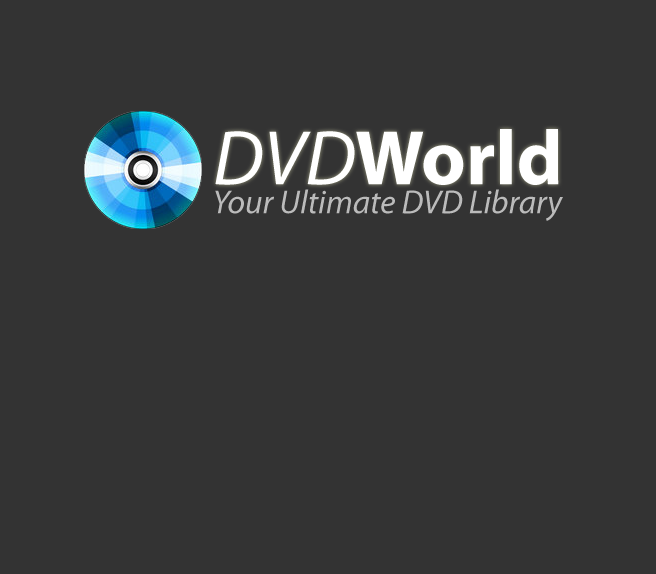
<style>
.page{position:relative;width:656px;height:574px;background:#333333}
.page>*{position:absolute;margin:0}
.t1{font:77.8px "MyriadPro-Bold";color:#ffffff}
.t2{font:77.8px "MyriadPro-It";color:#ffffff}
.t3{font:33.3px "MyriadPro-It";color:#bbbbbb}
</style>
<div class="page">
<p class="t1" style="left:215px;top:129px;width:344px;height:56px"><span class="t2">DVD</span>World</p>
<p class="t3" style="left:215px;top:189px;width:348px;height:32px">Your Ultimate DVD Library</p>
</div>
